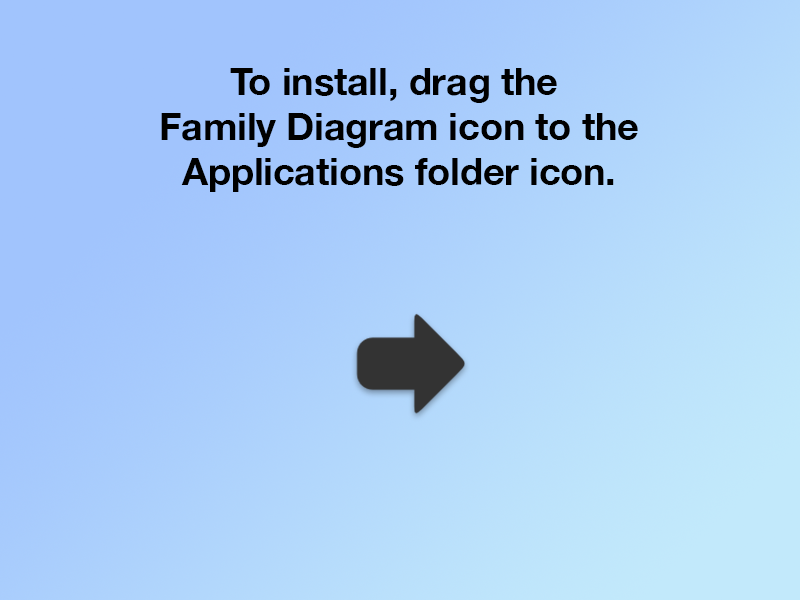
<style>
.page{position:relative;width:800px;height:600px}
.page>*{position:absolute;margin:0}
.t1{font:37.5px "HelveticaNeue-Bold";color:#000000}
</style>
<div class="page">
<p class="t1" style="left:161px;top:68px;width:477px;height:124px;text-align:center">To install, drag the <br>Family Diagram icon to the<br>Applications folder icon.</p>
</div>
